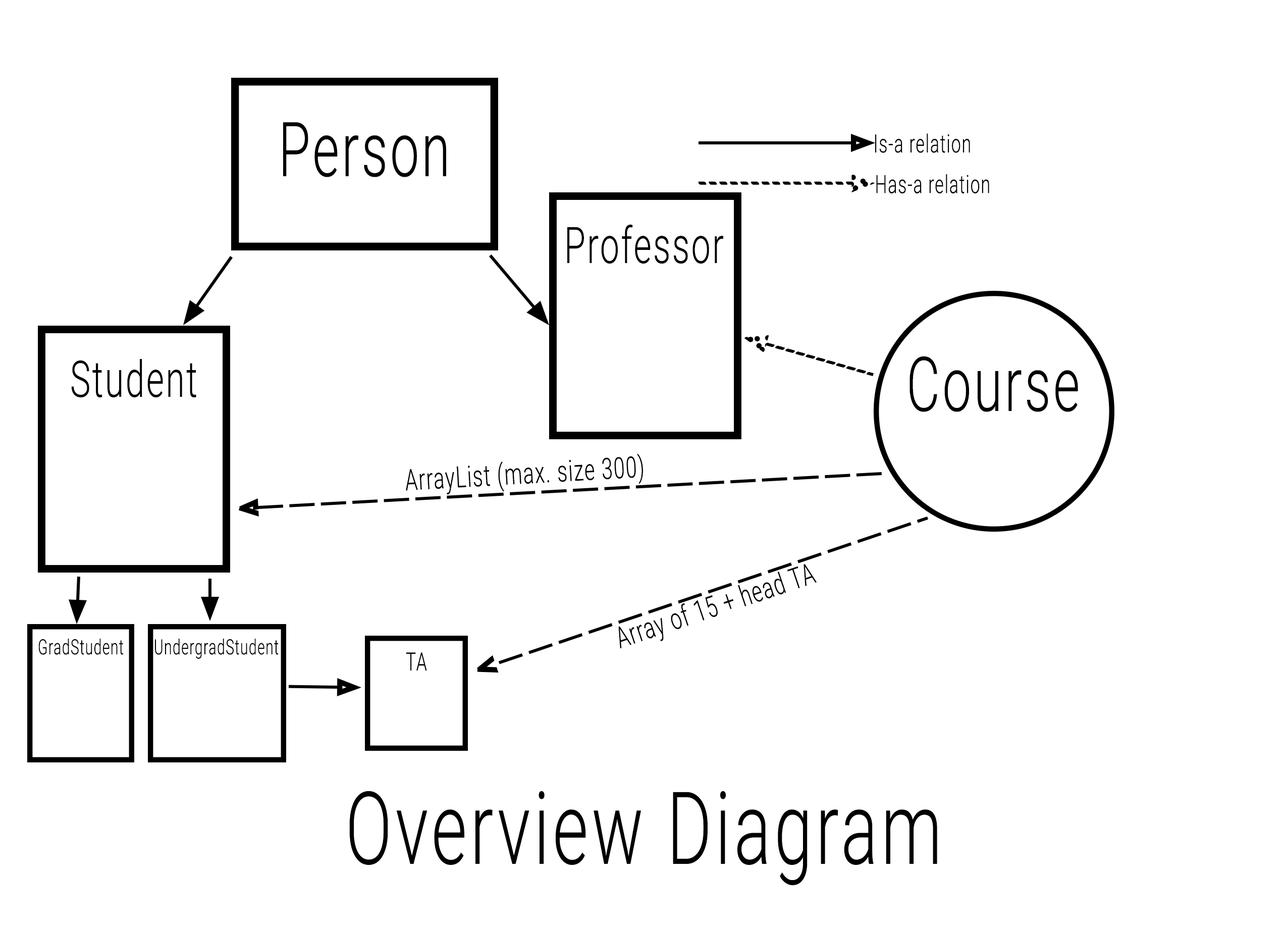
<style>
.page{position:relative;width:1287px;height:927px;background:#ffffff}
.page>*{position:absolute;margin:0}
.t1{font:6.1px "Roboto-Light";letter-spacing:0.05em;color:#000000;scale:0.68 1}
.t2{font:50.5px "Roboto-Light";letter-spacing:0.05em;color:#000000;scale:0.68 1}
.t3{font:75.7px "Roboto-Light";letter-spacing:0.05em;color:#000000;scale:0.68 1}
.t4{font:29.4px "Roboto-Light";letter-spacing:0.05em;color:#000000;scale:0.68 1}
.t5{font:21px "Roboto-Light";letter-spacing:0.05em;color:#000000;scale:0.68 1}
.t6{font:25.2px "Roboto-Light";letter-spacing:0.05em;color:#000000;scale:0.68 1}
.t7{font:100.9px "Roboto-Light";letter-spacing:0.05em;color:#000000;scale:0.68 1}
</style>
<div class="page">
<p class="t1" style="left:875px;top:133px;width:95px;height:20px">Is-a relation</p>
<p class="t1" style="left:876px;top:174px;width:113px;height:19px">Has-a relation</p>
<p class="t2" style="left:567px;top:224px;width:157px;height:39px">Professor</p>
<p class="t2" style="left:71px;top:359px;width:125px;height:38px">Student</p>
<p class="t3" style="left:909px;top:356px;width:169px;height:56px">Course</p>
<p class="t4" style="left:406px;top:453px;width:237px;height:42px;rotate:-3deg">ArrayList (max. size 300)</p>
<p class="t4" style="left:618px;top:564px;width:199px;height:85px;rotate:-19deg">Array of 15 + head TA</p>
<p class="t5" style="left:39px;top:638px;width:84px;height:17px">GradStudent</p>
<p class="t5" style="left:155px;top:638px;width:124px;height:21px">UndergradStudent</p>
<p class="t6" style="left:406px;top:652px;width:21px;height:18px">TA</p>
<p class="t7" style="left:349px;top:790px;width:588px;height:95px">Overview Diagram</p>
</div>
